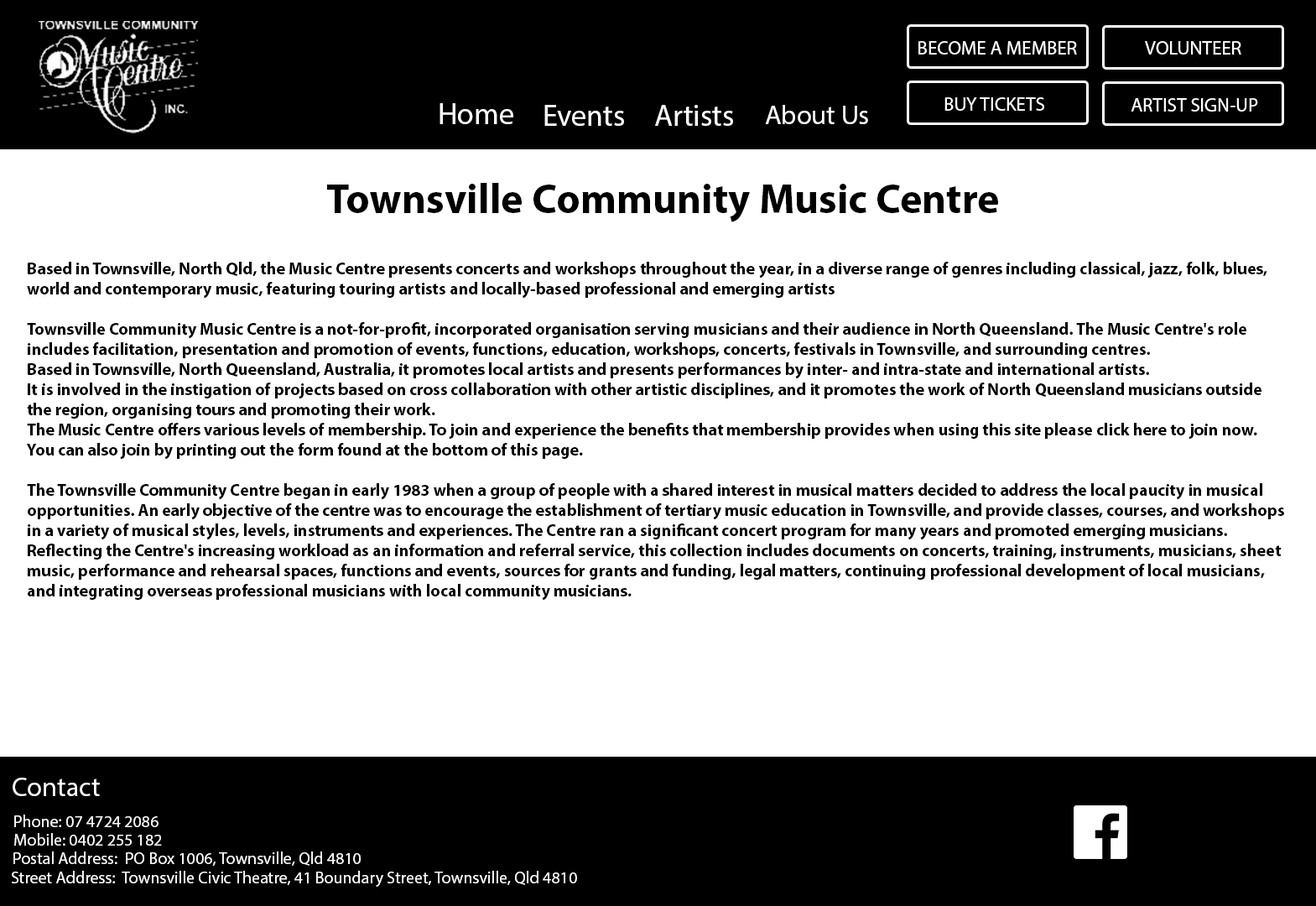
<style>
.page{position:relative;width:1316px;height:906px;background:#ffffff}
.page>*{position:absolute;margin:0}
.t1{font:19.3px "MyriadPro-Regular";color:#ffffff}
.t2{font:30.2px "MyriadPro-Regular";color:#ffffff}
.t3{font:27.1px "MyriadPro-Regular";color:#ffffff}
.t4{font:41.9px "MyriadPro-Bold";color:#000000}
.t5{font:16.8px "MyriadPro-Bold";color:#000000}
.t6{font:16.8px "MyriadPro-Regular";color:#ffffff}
</style>
<div class="page">
<p class="t1" style="left:919px;top:41px;width:158px;height:14px">BECOME A MEMBER</p>
<p class="t1" style="left:1145px;top:41px;width:97px;height:14px">VOLUNTEER</p>
<p class="t1" style="left:945px;top:97px;width:99px;height:14px">BUY TICKETS</p>
<p class="t1" style="left:1131px;top:98px;width:127px;height:14px">ARTIST SIGN-UP</p>
<p class="t2" style="left:440px;top:103px;width:73px;height:21px">Home</p>
<p class="t2" style="left:544px;top:105px;width:80px;height:21px">Events</p>
<p class="t2" style="left:655px;top:105px;width:78px;height:21px">Artists</p>
<p class="t3" style="left:765px;top:105px;width:103px;height:19px">About Us</p>
<p class="t4" style="left:327px;top:183px;width:671px;height:39px">Townsville Community Music Centre</p>
<p class="t5" style="left:26px;top:262px;width:1258px;height:339px">Based in Townsville, North Qld, the Music Centre presents concerts and workshops throughout the year, in a diverse range of genres including classical, jazz, folk, blues, <br>world and contemporary music, featuring touring artists and locally-based professional and emerging artists<br><br>Townsville Community Music Centre is a not-for-profit, incorporated organisation serving musicians and their audience in North Queensland. The Music Centre's role <br>includes facilitation, presentation and promotion of events, functions, education, workshops, concerts, festivals in Townsville, and surrounding centres.<br>Based in Townsville, North Queensland, Australia, it promotes local artists and presents performances by inter- and intra-state and international artists.<br>It is involved in the instigation of projects based on cross collaboration with other artistic disciplines, and it promotes the work of North Queensland musicians outside <br>the region, organising tours and promoting their work.<br>The Music Centre offers various levels of membership. To join and experience the benefits that membership provides when using this site please click here to join now. <br>You can also join by printing out the form found at the bottom of this page.<br><br>The Townsville Community Centre began in early 1983 when a group of people with a shared interest in musical matters decided to address the local paucity in musical<br>opportunities. An early objective of the centre was to encourage the establishment of tertiary music education in Townsville, and provide classes, courses, and workshops<br>in a variety of musical styles, levels, instruments and experiences. The Centre ran a significant concert program for many years and promoted emerging musicians.<br>Reflecting the Centre's increasing workload as an information and referral service, this collection includes documents on concerts, training, instruments, musicians, sheet<br>music, performance and rehearsal spaces, functions and events, sources for grants and funding, legal matters, continuing professional development of local musicians, <br>and integrating overseas professional musicians with local community musicians.</p>
<p class="t3" style="left:13px;top:778px;width:87px;height:18px">Contact</p>
<p class="t6" style="left:14px;top:815px;width:145px;height:12px">Phone: 07 4724 2086</p>
<p class="t6" style="left:14px;top:833px;width:148px;height:13px">Mobile: 0402 255 182</p>
<p class="t6" style="left:13px;top:851px;width:348px;height:15px">Postal Address:  PO Box 1006, Townsville, Qld 4810</p>
<p class="t6" style="left:12px;top:871px;width:565px;height:16px">Street Address:  Townsville Civic Theatre, 41 Boundary Street, Townsville, Qld 4810</p>
</div>
